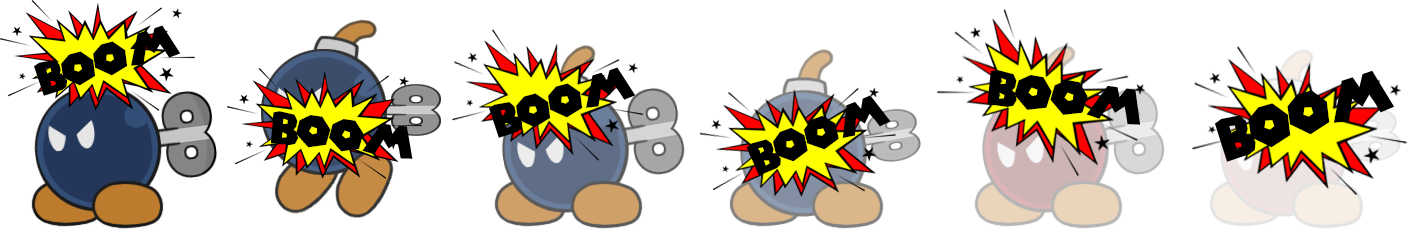
<style>
.page{position:relative;width:1423px;height:235px;background:#ffffff}
.page>*{position:absolute;margin:0}
.t1{font:43.8px "SuperMarioGalaxy";color:#000000}
.t2{font:47.3px "SuperMarioGalaxy";color:#000000}
.t3{font:56.6px "SuperMarioGalaxy";color:#000000;scale:0.96 1}
</style>
<div class="page">
<p class="t1" style="left:34px;top:25px;width:147px;height:71px;rotate:-17deg">boom</p>
<p class="t1" style="left:489px;top:67px;width:147px;height:71px;rotate:-17deg">boom</p>
<p class="t2" style="left:987px;top:70px;width:153px;height:55px;rotate:8deg">boom</p>
<p class="t3" style="left:1215px;top:70px;width:179px;height:92px;rotate:-18deg">boom</p>
<p class="t1" style="left:746px;top:95px;width:145px;height:81px;rotate:-22deg">boom</p>
<p class="t1" style="left:270px;top:111px;width:143px;height:48px;rotate:6deg">boom</p>
</div>
